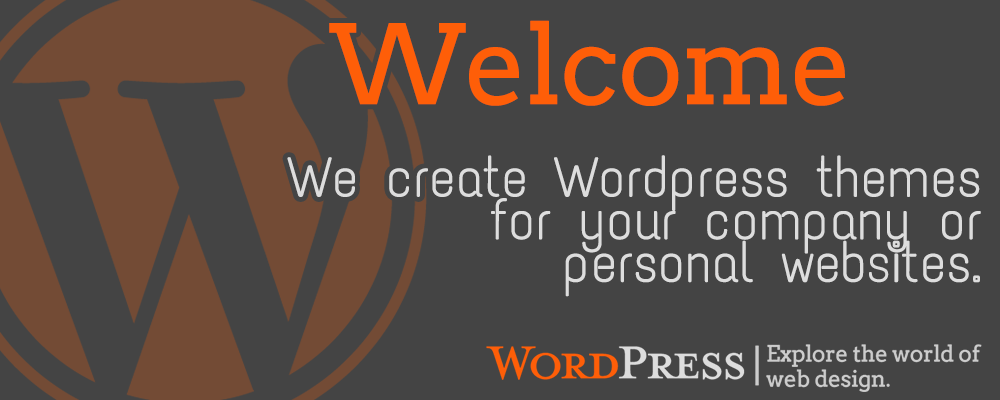
<style>
.page{position:relative;width:1000px;height:400px;background:#444444}
.page>*{position:absolute;margin:0}
.t1{font:109.2px "Arvo";letter-spacing:-0.04em;color:#fe5e08;font-weight:bold}
.t2{font:56px/42.6px "TextMeOne-Regular";letter-spacing:-0.04em;color:#dddddd;font-weight:bold}
</style>
<div class="page">
<p class="t1" style="left:329px;top:20px;width:516px;height:86px">Welcome</p>
<p class="t2" style="left:287px;top:155px;width:694px;height:142px;text-align:right">We create Wordpress themes<br>for your company or<br>personal websites.</p>
</div>
